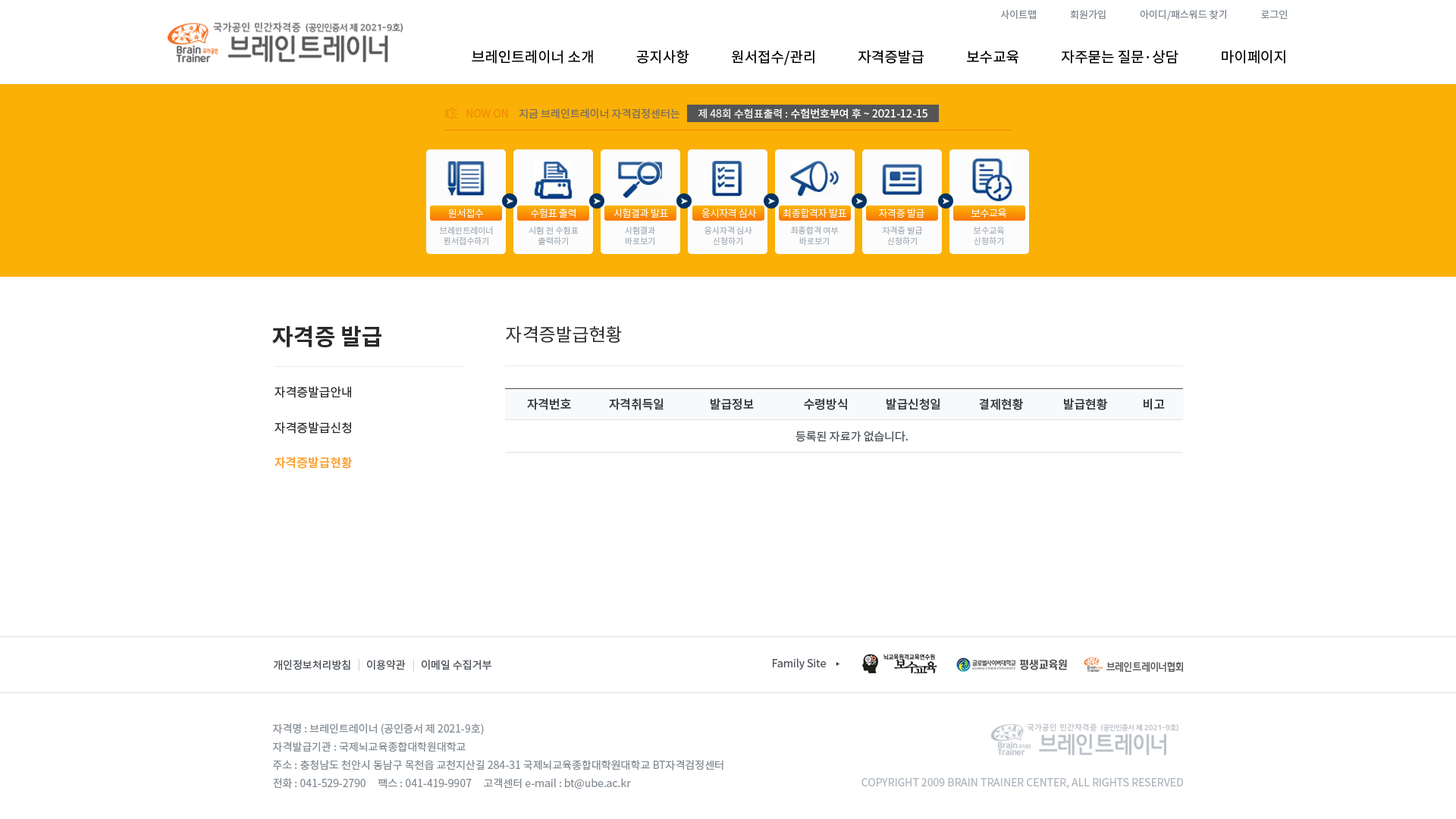
<style>
.page{position:relative;width:1456px;height:819px;background:#ffffff}
.page>*{position:absolute;margin:0}
.t1{font:9.9px "NotoSansCJKkr-Regular";letter-spacing:0.001em;color:#868e96}
.t2{font:14.4px "NotoSansCJKkr-Regular";color:#000000}
.t3{font:10.6px "NotoSansCJKkr-Regular";color:#f08c00}
.t4{font:10.6px "NotoSansCJKkr-Regular";color:#7c6d5d}
.t5{font:10.6px "NotoSansCJKkr-Medium";color:#f8f8f8}
.t6{font:10.6px "NotoSansCJKkr-Regular";color:#f8f8f8}
.t7{font:9.9px "NotoSansCJKkr-Light";letter-spacing:-0.025em;color:#fcfcfc}
.t8{font:8.3px/10.6px "NotoSansCJKkr-Regular";color:#adb5bd}
.t9{font:22.7px "NotoSansCJKkr-Bold";color:#2b2b2b}
.t10{font:18.2px "NotoSansCJKkr-Regular";color:#2b2b2b}
.t11{font:12.1px "NotoSansCJKkr-Regular";color:#2b2b2b}
.t12{font:12.1px "NotoSansCJKkr-Medium";color:#343a40}
.t13{font:11.4px "NotoSansCJKkr-Regular";color:#495057;text-transform:uppercase}
.t14{font:12.1px "NotoSansCJKkr-Medium";color:#fd9f27}
.t15{font:10.6px "NotoSansCJKkr-Regular";color:#495057}
.t16{font:10.6px "NotoSansCJKkr-Regular";color:#ced4da}
.t17{font:10.6px/18.2px "NotoSansCJKkr-Regular";color:#868e96}
.t18{font:10.6px "NotoSansCJKkr-Regular";color:#adb5bd}
</style>
<div class="page">
<p class="t1" style="left:1000px;top:9px;width:288px;height:11px">사이트맵               회원가입               아이디/패스워드 찾기               로그인</p>
<p class="t2" style="left:472px;top:49px;width:813px;height:16px">브레인트레이너 소개             공지사항             원서접수/관리             자격증발급             보수교육             자주묻는 질문·상담             마이페이지</p>
<p class="t3" style="left:466px;top:109px;width:42px;height:9px">NOW ON</p>
<p class="t4" style="left:519px;top:108px;width:161px;height:11px">지금 브레인트레이너 자격검정센터는</p>
<p class="t5" style="left:698px;top:108px;width:229px;height:11px"><span class="t6">제 48회 수험표출력 : </span>수험번호부여 후 ~ 2021-12-15</p>
<p class="t7" style="left:448px;top:209px;width:36px;height:9px">원서접수</p>
<p class="t7" style="left:531px;top:208px;width:45px;height:10px">수험표 출력</p>
<p class="t7" style="left:613px;top:208px;width:55px;height:10px">시험결과 발표</p>
<p class="t7" style="left:701px;top:208px;width:56px;height:10px">응시자격 심사</p>
<p class="t7" style="left:783px;top:208px;width:63px;height:10px">최종합격자 발표</p>
<p class="t7" style="left:879px;top:208px;width:45px;height:10px">자격증 발급</p>
<p class="t7" style="left:971px;top:209px;width:35px;height:9px">보수교육</p>
<p class="t8" style="left:440px;top:226px;width:53px;height:20px;text-align:center">브레인트레이너<br>원서접수하기</p>
<p class="t8" style="left:529px;top:226px;width:50px;height:20px;text-align:center">시험 전 수험표<br>출력하기</p>
<p class="t8" style="left:625px;top:226px;width:30px;height:20px;text-align:center">시험결과<br>바로보기</p>
<p class="t8" style="left:704px;top:226px;width:48px;height:20px;text-align:center">응시자격 심사<br>신청하기</p>
<p class="t8" style="left:791px;top:226px;width:48px;height:20px;text-align:center">최종합격 여부<br>바로보기</p>
<p class="t8" style="left:882px;top:226px;width:41px;height:20px;text-align:center">자격증 발급<br>신청하기</p>
<p class="t8" style="left:974px;top:226px;width:31px;height:20px;text-align:center">보수교육<br>신청하기</p>
<p class="t9" style="left:272px;top:325px;width:109px;height:22px">자격증 발급</p>
<p class="t10" style="left:506px;top:326px;width:116px;height:17px">자격증발급현황</p>
<p class="t11" style="left:275px;top:386px;width:76px;height:12px">자격증발급안내</p>
<p class="t12" style="left:527px;top:398px;width:44px;height:12px">자격번호</p>
<p class="t12" style="left:609px;top:398px;width:55px;height:12px">자격취득일</p>
<p class="t12" style="left:711px;top:398px;width:43px;height:12px">발급정보</p>
<p class="t12" style="left:804px;top:398px;width:43px;height:12px">수령방식</p>
<p class="t12" style="left:886px;top:398px;width:54px;height:12px">발급신청일</p>
<p class="t12" style="left:979px;top:398px;width:44px;height:12px">결제현황</p>
<p class="t12" style="left:1064px;top:398px;width:43px;height:12px">발급현황</p>
<p class="t12" style="left:1144px;top:398px;width:21px;height:12px">비고</p>
<p class="t11" style="left:275px;top:422px;width:76px;height:12px">자격증발급신청</p>
<p class="t13" style="left:795px;top:431px;width:113px;height:11px">등록된 자료가 없습니다.</p>
<p class="t14" style="left:275px;top:457px;width:77px;height:12px">자격증발급현황</p>
<p class="t15" style="left:273px;top:660px;width:77px;height:10px">개인정보처리방침</p>
<p class="t16" style="left:358px;top:659px;width:1px;height:12px">|</p>
<p class="t15" style="left:367px;top:660px;width:39px;height:10px">이용약관</p>
<p class="t16" style="left:413px;top:659px;width:1px;height:12px">|</p>
<p class="t15" style="left:422px;top:660px;width:69px;height:10px">이메일 수집거부</p>
<p class="t15" style="left:773px;top:658px;width:53px;height:12px">Family Site</p>
<p class="t17" style="left:272px;top:723px;width:451px;height:66px">자격명 : 브레인트레이너 (공인증서 제 2021-9호)<br>자격발급기관 : 국제뇌교육종합대학원대학교<br>주소 : 충청남도 천안시 동남구 목천읍 교천지산길 284-31 국제뇌교육종합대학원대학교 BT자격검정센터<br>전화 : 041-529-2790     팩스 : 041-419-9907     고객센터 e-mail : bt@ube.ac.kr</p>
<p class="t18" style="left:861px;top:778px;width:322px;height:11px">COPYRIGHT 2009 BRAIN TRAINER CENTER, ALL RIGHTS RESERVED</p>
</div>
